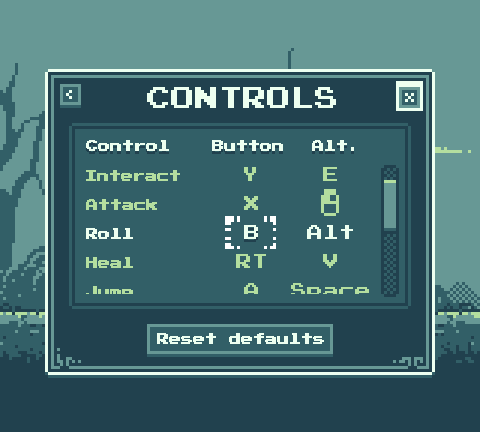
<style>
.page{position:relative;width:480px;height:432px;background:#325f67}
.page>*{position:absolute;margin:0}
.t1{font:24px "PressStart2P";color:#edfff0}
.t2{font:12px "PressStart2P";color:#edfff0}
.t3{font:12px "PressStart2P";color:#b4de9f}
.t4{font:16px "PressStart2P";color:#b4de9f}
.t5{font:16px "PressStart2P";color:#edfff0}
</style>
<div class="page">
<p class="t1" style="left:147px;top:87px;width:189px;height:21px">CONTROLS</p>
<p class="t2" style="left:86px;top:140px;width:83px;height:11px">Control</p>
<p class="t2" style="left:212px;top:140px;width:71px;height:11px">Button</p>
<p class="t2" style="left:312px;top:140px;width:42px;height:11px">Alt.</p>
<p class="t3" style="left:86px;top:170px;width:94px;height:11px">Interact</p>
<p class="t4" style="left:244px;top:167px;width:12px;height:14px">Y</p>
<p class="t4" style="left:323px;top:167px;width:14px;height:14px">E</p>
<p class="t4" style="left:244px;top:196px;width:14px;height:14px">X</p>
<p class="t3" style="left:86px;top:199px;width:71px;height:11px">Attack</p>
<p class="t2" style="left:86px;top:228px;width:47px;height:11px">Roll</p>
<p class="t5" style="left:244px;top:225px;width:14px;height:14px">B</p>
<p class="t5" style="left:307px;top:225px;width:46px;height:14px">Alt</p>
<p class="t3" style="left:86px;top:257px;width:47px;height:11px">Heal</p>
<p class="t4" style="left:236px;top:254px;width:30px;height:14px">RT</p>
<p class="t4" style="left:323px;top:254px;width:14px;height:14px">V</p>
<p class="t3" style="left:86px;top:286px;width:47px;height:12px">Jump</p>
<p class="t4" style="left:244px;top:283px;width:14px;height:14px">A</p>
<p class="t4" style="left:291px;top:283px;width:78px;height:16px">Space</p>
<p class="t2" style="left:157px;top:333px;width:167px;height:11px">Reset defaults</p>
</div>
